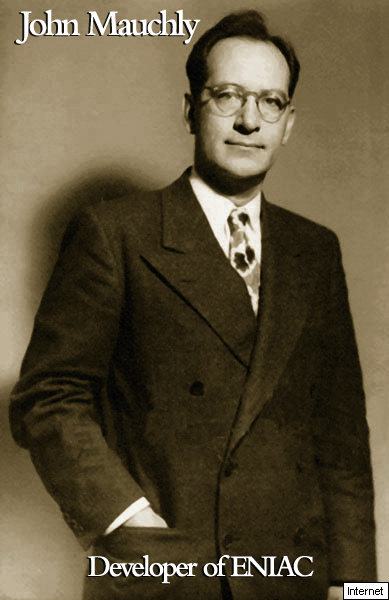
<style>
.page{position:relative;width:389px;height:600px}
.page>*{position:absolute;margin:0}
.t1{font:37.4px "BemboMT-SemiBold";letter-spacing:-0.08em;color:#ffffff;scale:0.95 1}
.t2{font:31.2px "BemboMT-SemiBold";letter-spacing:-0.08em;color:#ffffff;scale:0.95 1}
</style>
<div class="page">
<p class="t1" style="left:16px;top:9px;width:185px;height:35px">John Mauchly</p>
<p class="t2" style="left:88px;top:555px;width:226px;height:29px">Developer of ENIAC</p>
</div>
